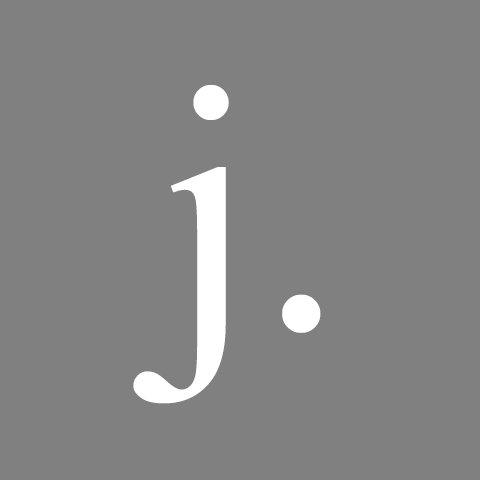
<style>
.page{position:relative;width:480px;height:480px;background:#808080}
.page>*{position:absolute;margin:0}
.t1{font:350px "TimesNewRomanPSMT";color:#ffffff}
</style>
<div class="page">
<p class="t1" style="left:133px;top:85px;width:188px;height:319px">.j</p>
</div>
